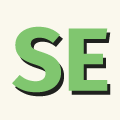
<style>
.page{position:relative;width:120px;height:120px;background:#faf8ed}
.page>*{position:absolute;margin:0}
.t1{font:90px "FiraSans-Bold";color:#80c66f}
</style>
<div class="page">
<p class="t1" style="left:12px;top:26px;width:96px;height:67px">SE</p>
<p class="t1" style="left:15px;top:30px;width:96px;height:67px">SE</p>
</div>
